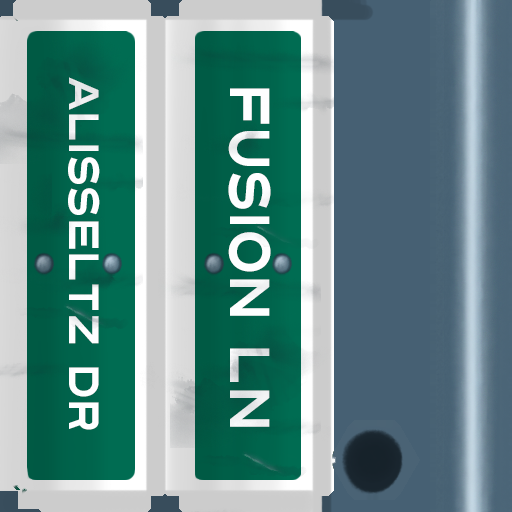
<style>
.page{position:relative;width:512px;height:512px}
.page>*{position:absolute;margin:0}
.t1{font:42px "Turnpike";color:#fefeff;scale:0.75 1}
.t2{font:56px "Turnpike";color:#fefeff;scale:0.75 1}
</style>
<div class="page">
<p class="t1" style="left:68px;top:77px;width:32px;height:353px;rotate:90deg">Alisseltz Dr</p>
<p class="t2" style="left:228px;top:88px;width:43px;height:339px;rotate:90deg">Fusion ln</p>
</div>
